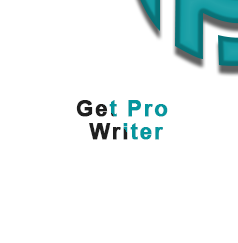
<style>
.page{position:relative;width:238px;height:243px;background:#ffffff}
.page>*{position:absolute;margin:0}
.t1{font:22px/23px "Arial-BoldMT";letter-spacing:0.065em;font-weight:bold}
</style>
<div class="page">
<p class="t1" style="left:76px;top:100px;width:92px;height:40px;text-align:center">Get Pro <br>Writer</p>
</div>
